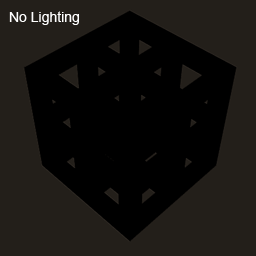
<style>
.page{position:relative;width:256px;height:256px;background:#231f1a}
.page>*{position:absolute;margin:0}
.t1{font:14px "ArialMT";color:#ffffff}
</style>
<div class="page">
<p class="t1" style="left:9px;top:11px;width:70px;height:14px">No Lighting</p>
</div>
